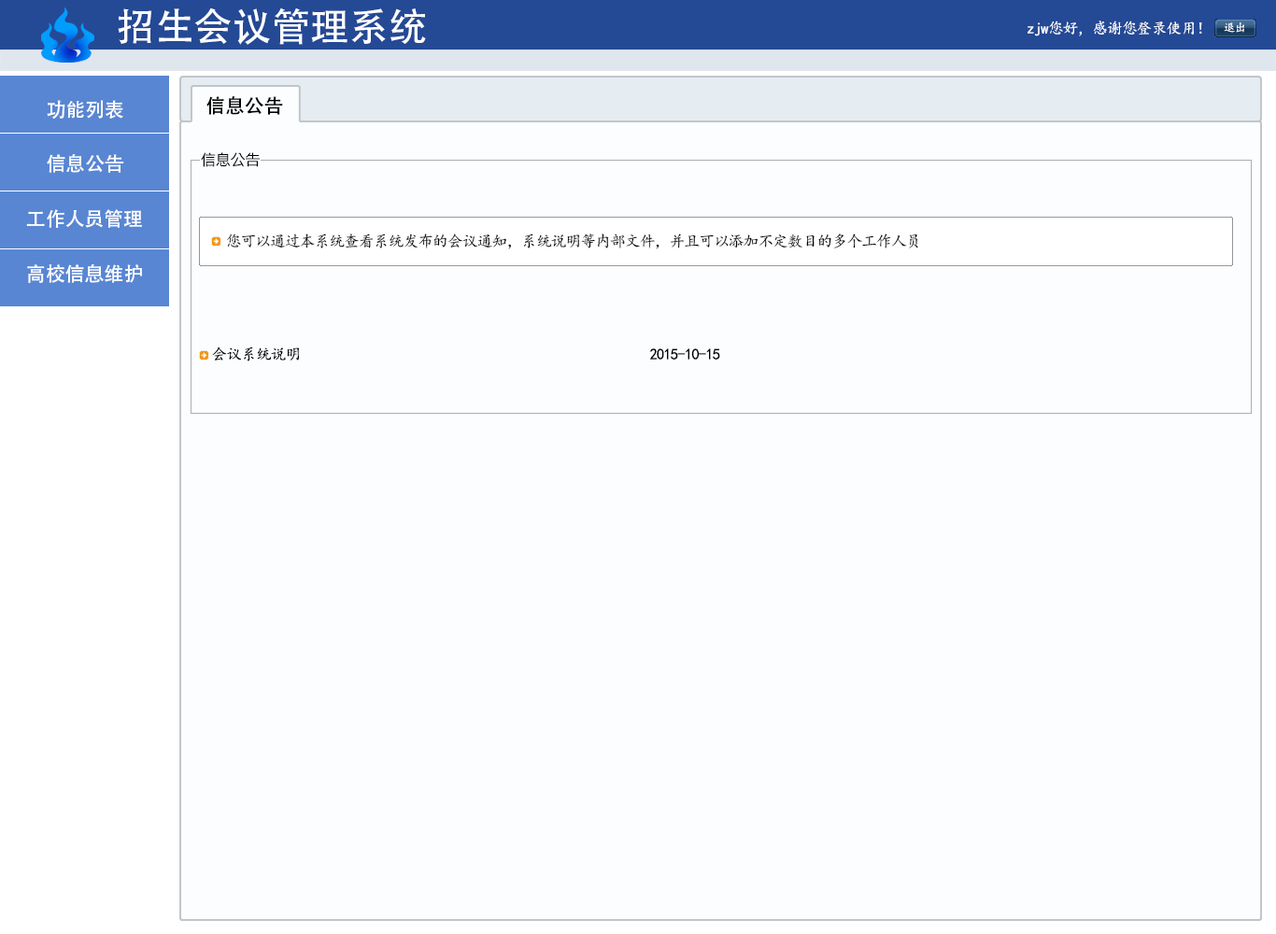
<style>
.page{position:relative;width:1276px;height:934px;background:#fbfdfe}
.page>*{position:absolute;margin:0}
.t1{font:38.9px "AdobeHeitiStd-Regular";color:#ffffff}
.t2{font:15.6px "KaiTi";letter-spacing:-0.05em;color:#ffffff}
.t3{font:11.7px "KaiTi";letter-spacing:-0.05em;color:#ffffff}
.t4{font:19.5px "AdobeHeitiStd-Regular";color:#fefefe}
.t5{font:19.5px "AdobeHeitiStd-Regular";color:#000000}
.t6{font:15.6px "MicrosoftJhengHeiRegular";letter-spacing:-0.05em;color:#000000}
.t7{font:15.6px "KaiTi";letter-spacing:-0.05em;color:#000000}
</style>
<div class="page">
<p class="t1" style="left:118px;top:7px;width:308px;height:38px">招生会议管理系统</p>
<p class="t2" style="left:1028px;top:21px;width:174px;height:15px">zjw您好，感谢您登录使用！</p>
<p class="t3" style="left:1224px;top:22px;width:21px;height:11px">退出</p>
<p class="t4" style="left:47px;top:100px;width:76px;height:20px">功能列表</p>
<p class="t5" style="left:206px;top:96px;width:77px;height:19px">信息公告</p>
<p class="t4" style="left:47px;top:154px;width:77px;height:19px">信息公告</p>
<p class="t6" style="left:201px;top:152px;width:59px;height:15px">信息公告</p>
<p class="t4" style="left:26px;top:209px;width:116px;height:19px">工作人员管理</p>
<p class="t7" style="left:227px;top:234px;width:691px;height:15px">您可以通过本系统查看系统发布的会议通知，系统说明等内部文件，并且可以添加不定数目的多个工作人员</p>
<p class="t4" style="left:27px;top:264px;width:115px;height:19px">高校信息维护</p>
<p class="t7" style="left:212px;top:347px;width:87px;height:15px">会议系统说明</p>
<p class="t7" style="left:649px;top:348px;width:71px;height:12px">2015-10-15</p>
</div>
